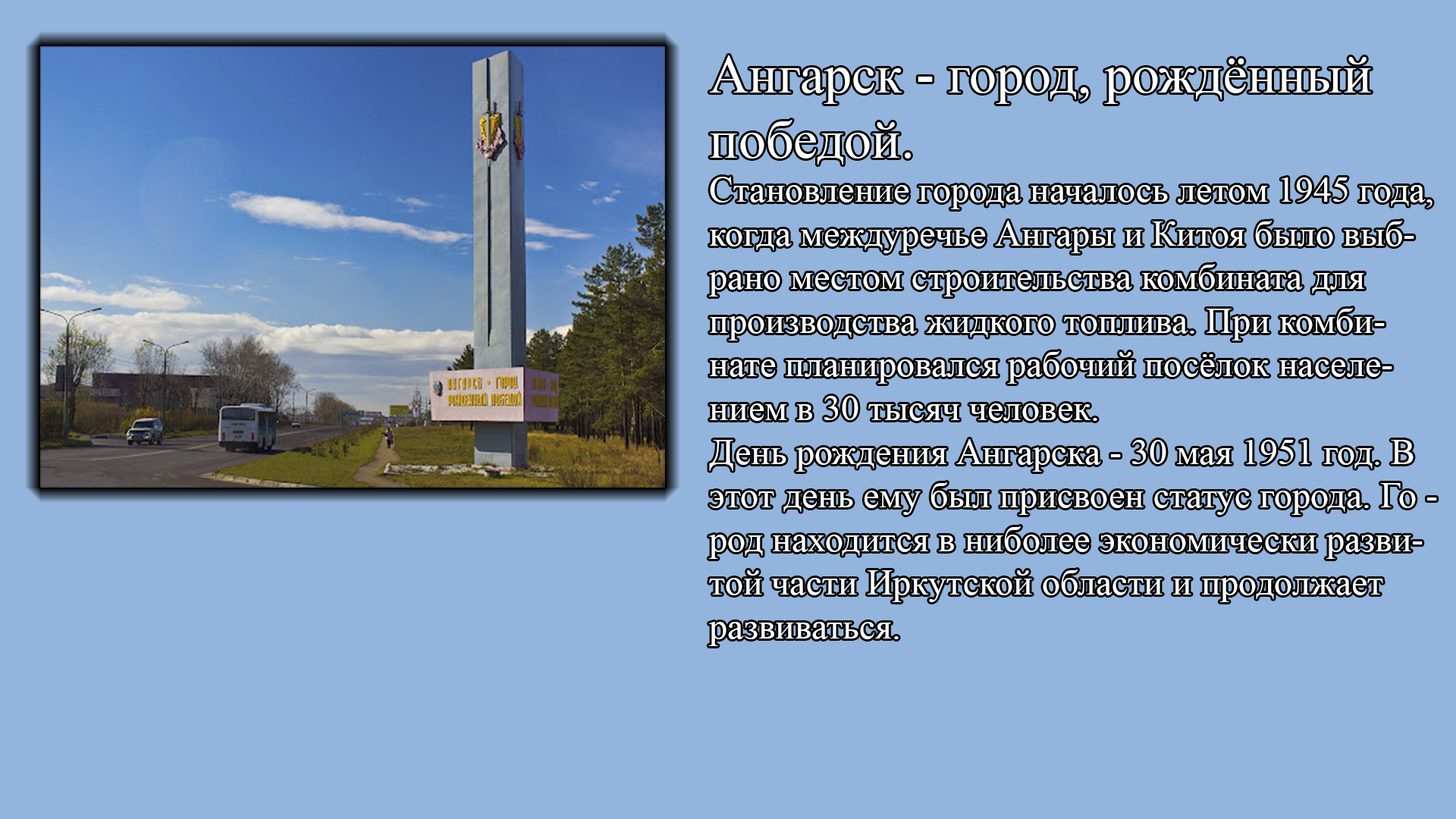
<style>
.page{position:relative;width:1456px;height:819px;background:#93b5dd}
.page>*{position:absolute;margin:0}
.t1{font:36.4px "TimesNewRomanPSMT";color:#ffffff}
.t2{font:54.6px "TimesNewRomanPSMT";color:#ffffff}
</style>
<div class="page">
<p class="t1" style="left:708px;top:55px;width:729px;height:591px"><span class="t2">Ангарск - город, рождённый <br>победой.<br></span>Становление города началось летом 1945 года,<br>когда междуречье Ангары и Китоя было выб-<br>рано местом строительства комбината для <br>производства жидкого топлива. При комби-<br>нате планировался рабочий посёлок населе-<br>нием в 30 тысяч человек.<br>День рождения Ангарска - 30 мая 1951 год. В<br>этот день ему был присвоен статус города. Го -<br>род находится в ниболее экономически разви-<br>той части Иркутской области и продолжает<br>развиваться.</p>
</div>
